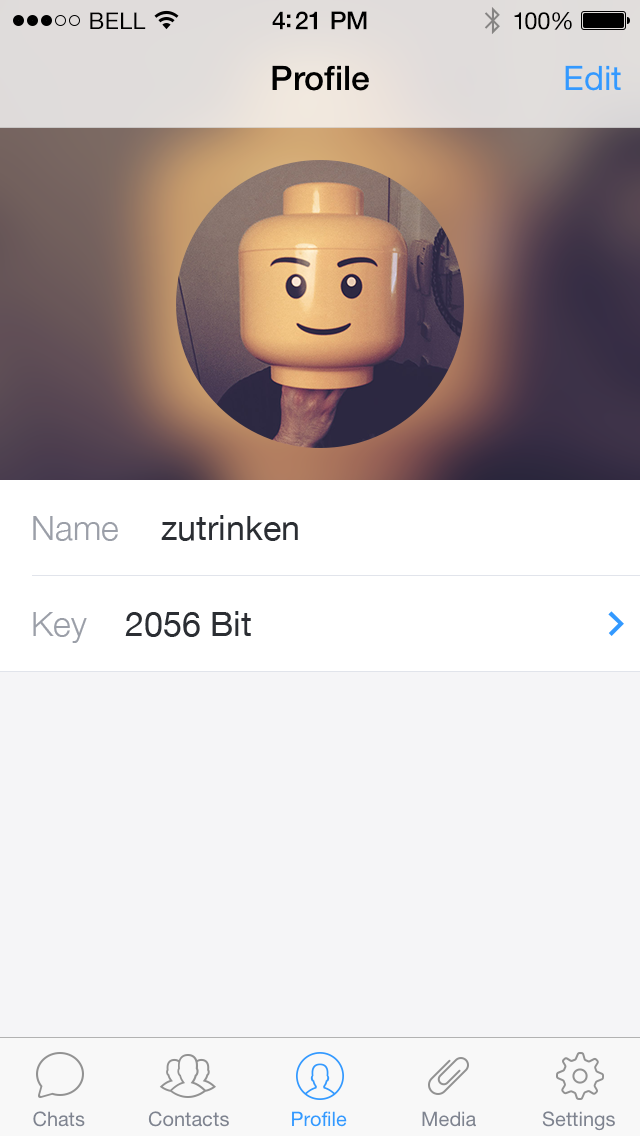
<style>
.page{position:relative;width:640px;height:1136px;background:#f5f5f7}
.page>*{position:absolute;margin:0}
.t1{font:23px "HelveticaNeue";letter-spacing:0.02em;color:#000000}
.t2{font:25px "HelveticaNeue-Medium";letter-spacing:-0.02em;color:#000000}
.t3{font:24px "HelveticaNeue";letter-spacing:-0.02em;color:#000000}
.t4{font:33.8px "HelveticaNeue-Medium";color:#000000}
.t5{font:33.8px "HelveticaNeue";color:#3399ff}
.t6{font:34px "HelveticaNeue-Light";color:#9b9fa8}
.t7{font:34px "HelveticaNeue";color:#2b2e33}
.t8{font:20px "HelveticaNeue";color:#7e838f}
.t9{font:20px "HelveticaNeue";color:#3399ff}
</style>
<div class="page">
<p class="t1" style="left:90px;top:12px;width:56px;height:17px">BELL</p>
<p class="t2" style="left:272px;top:11px;width:95px;height:19px">4:21 PM</p>
<p class="t3" style="left:514px;top:12px;width:58px;height:18px">100%</p>
<p class="t4" style="left:272px;top:65px;width:97px;height:26px">Profile</p>
<p class="t5" style="left:565px;top:65px;width:56px;height:26px">Edit</p>
<p class="t6" style="left:33px;top:516px;width:85px;height:25px">Name</p>
<p class="t7" style="left:161px;top:515px;width:137px;height:26px">zutrinken</p>
<p class="t6" style="left:33px;top:612px;width:54px;height:31px">Key</p>
<p class="t7" style="left:125px;top:611px;width:126px;height:26px">2056 Bit</p>
<p class="t8" style="left:33px;top:1111px;width:52px;height:16px">Chats</p>
<p class="t8" style="left:148px;top:1111px;width:81px;height:16px">Contacts</p>
<p class="t9" style="left:292px;top:1111px;width:55px;height:16px">Profile</p>
<p class="t8" style="left:422px;top:1111px;width:54px;height:16px">Media</p>
<p class="t8" style="left:542px;top:1111px;width:73px;height:20px">Settings</p>
</div>
